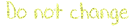
<style>
.page{position:relative;width:135px;height:28px;background:#ffffff}
.page>*{position:absolute;margin:0}
.t1{font:24px "DJBChalkItUp";scale:0.9 1}
</style>
<div class="page">
<p class="t1" style="left:6px;top:1px;width:123px;height:25px">Do not change</p>
</div>
